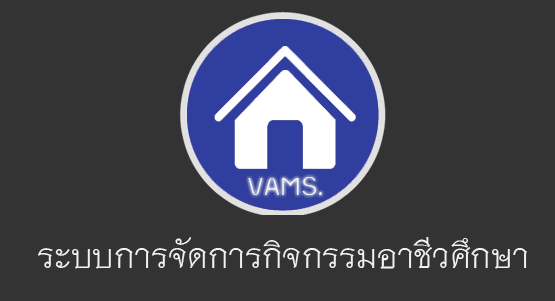
<style>
.page{position:relative;width:555px;height:301px;background:#333333}
.page>*{position:absolute;margin:0}
.t1{font:36px "THKoHo";color:#f9f7fa}
.t2{font:48px "THNiramitAS";color:#f2f1f1}
</style>
<div class="page">
<p class="t1" style="left:248px;top:177px;width:74px;height:18px">VAMS.</p>
<p class="t2" style="left:38px;top:237px;width:489px;height:32px">ระบบการจัดการกิจกรรมอาชีวศึกษา</p>
</div>
